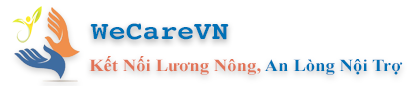
<style>
.page{position:relative;width:419px;height:86px;background:#ffffff}
.page>*{position:absolute;margin:0}
.t1{font:26px "Courier-Bold";color:#0071b6;scale:1.1 1}
.t2{font:17px "TimesNewRomanPS-BoldMT";color:#e27458;scale:1.1 1}
.t3{font:17px "TimesNewRomanPS-BoldMT";color:#0071b6;scale:1.1 1}
</style>
<div class="page">
<p class="t1" style="left:90px;top:23px;width:139px;height:17px">WeCareVN</p>
<p class="t2" style="left:89px;top:56px;width:314px;height:19px">Kết Nối Lương Nông,<span class="t3"> An Lòng Nội Trợ</span></p>
</div>
